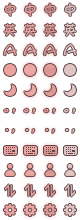
<style>
.page{position:relative;width:80px;height:220px;background:#ffffff}
.page>*{position:absolute;margin:0}
.t1{font:14.6px "FZKATJW--GB1-0";color:#eaa39e}
.t2{font:14.3px "FZKATJW--GB1-0";color:#eaa39e;scale:1.04 1}
.t3{font:14.6px "FZKATJW--GB1-0";color:#dfc6c4}
</style>
<div class="page">
<p class="t1" style="left:4px;top:3px;width:12px;height:13px">中</p>
<p class="t1" style="left:44px;top:3px;width:12px;height:13px">中</p>
<p class="t2" style="left:4px;top:23px;width:12px;height:13px">英</p>
<p class="t2" style="left:24px;top:23px;width:12px;height:13px">英</p>
<p class="t2" style="left:44px;top:23px;width:12px;height:13px">英</p>
<p class="t3" style="left:64px;top:23px;width:12px;height:13px">英</p>
<p class="t2" style="left:4px;top:108px;width:11px;height:6px">。，</p>
</div>
